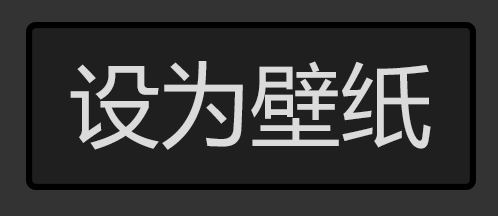
<style>
.page{position:relative;width:498px;height:216px;background:#1f1f1f}
.page>*{position:absolute;margin:0}
.t1{font:90.6px "MicrosoftYaHei";color:#dbdbdb}
</style>
<div class="page">
<p class="t1" style="left:70px;top:61px;width:361px;height:89px">设为壁纸</p>
</div>
